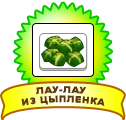
<style>
.page{position:relative;width:126px;height:120px;background:#ffffff}
.page>*{position:absolute;margin:0}
.t1{font:9px/9.4px "Arial-Black";letter-spacing:0.05em;color:#5b3714;text-transform:uppercase}
.t2{font:9px/9.4px "Arial-Black";letter-spacing:0.06em;color:#5b3714;text-transform:uppercase}
</style>
<div class="page">
<p class="t1" style="left:21px;top:86px;width:84px;height:20px;text-align:center"><span class="t2">Лау-лау <br></span>из цыпленка</p>
</div>
